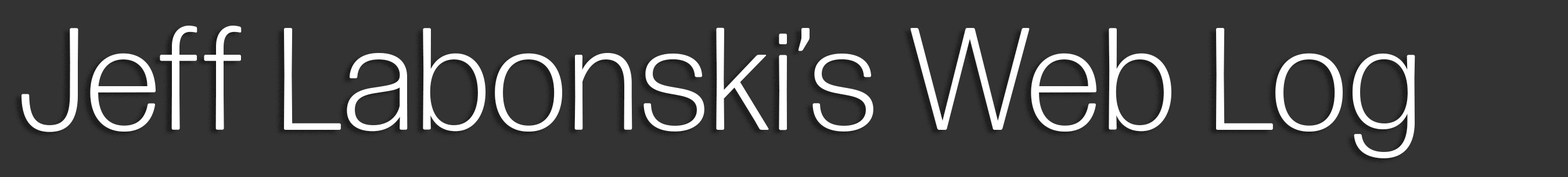
<style>
.page{position:relative;width:1568px;height:177px;background:#333333}
.page>*{position:absolute;margin:0}
.t1{font:145.2px "FormaDJRMicro-Light";color:#ffffff}
</style>
<div class="page">
<p class="t1" style="left:21px;top:26px;width:1394px;height:132px">Jeff Labonski’s Web Log</p>
</div>
